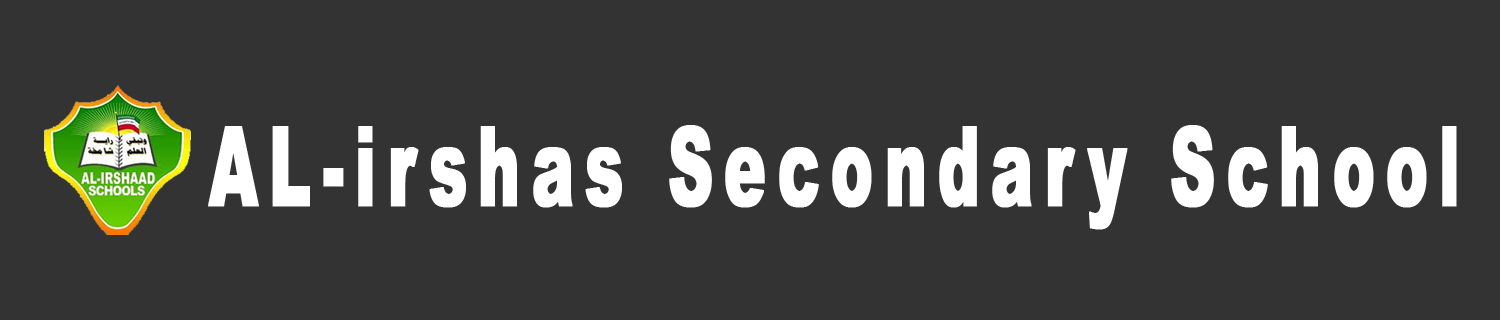
<style>
.page{position:relative;width:1500px;height:320px;background:#333333}
.page>*{position:absolute;margin:0}
.t1{font:110px "Arial-Black";letter-spacing:0.16em;color:#ffffff;font-weight:bold;scale:0.57 1}
</style>
<div class="page">
<p class="t1" style="left:208px;top:125px;width:1249px;height:105px">AL-irshas Secondary School</p>
</div>
